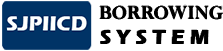
<style>
.page{position:relative;width:223px;height:51px;background:#ffffff}
.page>*{position:absolute;margin:0}
.t1{font:21.3px "Perpetua-Bold";color:#000000}
.t2{font:21.3px "ErasITC-Bold";color:#000000}
</style>
<div class="page">
<p class="t1" style="left:99px;top:6px;width:124px;height:14px">BORROWING</p>
<p class="t1" style="left:100px;top:6px;width:123px;height:14px">BORROWING</p>
<p class="t2" style="left:100px;top:30px;width:109px;height:14px">S Y S T E M</p>
</div>
